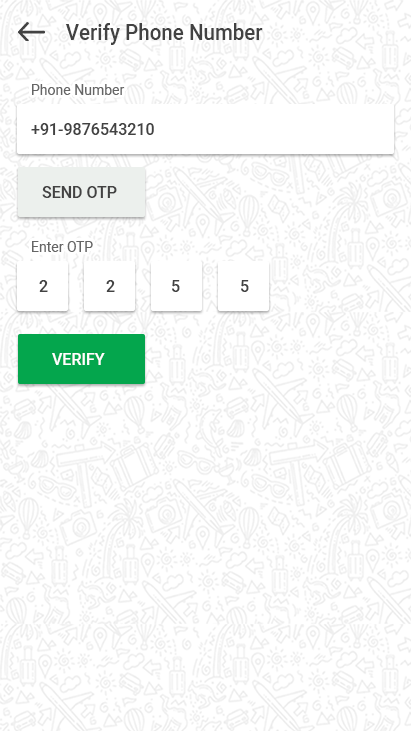
<style>
.page{position:relative;width:411px;height:731px;background:#ffffff}
.page>*{position:absolute;margin:0}
.t1{font:21.4px "Heebo-Medium";color:#424242;scale:0.96 1}
.t2{font:14px "Heebo-Regular";color:#666666}
.t3{font:16px "Heebo-Medium";color:#424242}
.t4{font:16px "Heebo-Medium";color:#424242;text-transform:uppercase}
.t5{font:16px "Heebo-Medium";color:#ffffff;text-transform:uppercase}
</style>
<div class="page">
<p class="t1" style="left:65px;top:23px;width:198px;height:22px">Verify Phone Number</p>
<p class="t2" style="left:32px;top:84px;width:93px;height:11px">Phone Number</p>
<p class="t3" style="left:31px;top:123px;width:123px;height:12px">+91-9876543210</p>
<p class="t4" style="left:42px;top:186px;width:75px;height:12px">Send OTP</p>
<p class="t2" style="left:32px;top:241px;width:61px;height:11px">Enter OTP</p>
<p class="t3" style="left:39px;top:280px;width:9px;height:12px">2</p>
<p class="t3" style="left:106px;top:280px;width:9px;height:12px">2</p>
<p class="t3" style="left:172px;top:280px;width:8px;height:12px">5</p>
<p class="t3" style="left:241px;top:280px;width:8px;height:12px">5</p>
<p class="t5" style="left:52px;top:353px;width:53px;height:12px">Verify</p>
</div>
